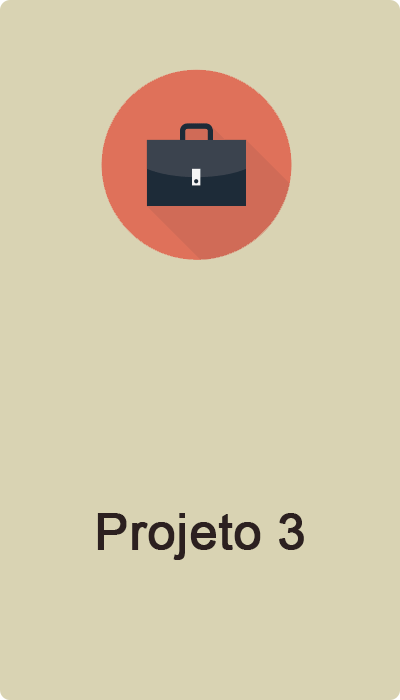
<style>
.page{position:relative;width:400px;height:700px;background:#d9d3b3}
.page>*{position:absolute;margin:0}
.t1{font:12px/25.5px "ArialMT";color:#2c2020;font-weight:bold}
</style>
<div class="page">
<p class="t1" style="left:97px;top:513px;width:207px;height:47px">Projeto 3</p>
</div>
